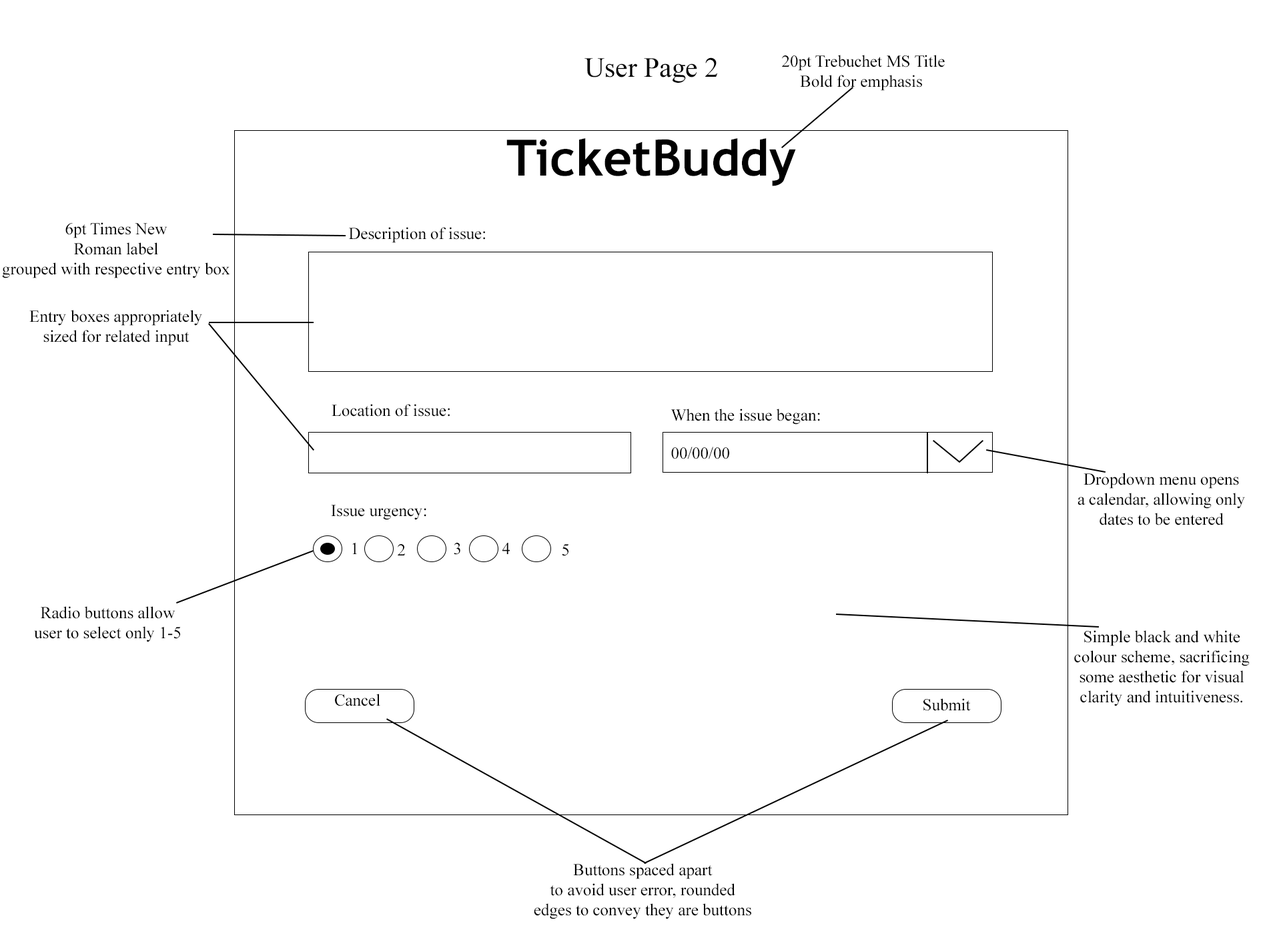
<style>
.page{position:relative;width:1261px;height:946px;background:#ffffff}
.page>*{position:absolute;margin:0}
.t1{font:27.8px "TimesNewRomanPSMT";color:#000000}
.t2{font:16.7px "TimesNewRomanPSMT";color:#000000}
.t3{font:50px "TrebuchetMS-Bold";color:#000000}
</style>
<div class="page">
<p class="t1" style="left:585px;top:57px;width:133px;height:26px">User Page 2</p>
<p class="t2" style="left:782px;top:55px;width:163px;height:36px;text-align:center">20pt Trebuchet MS Title<br>Bold for emphasis</p>
<p class="t3" style="left:506px;top:138px;width:290px;height:48px">TicketBuddy</p>
<p class="t2" style="left:2px;top:222px;width:228px;height:56px;text-align:center">6pt Times New<br>Roman label<br>grouped with respective entry box</p>
<p class="t2" style="left:349px;top:227px;width:136px;height:16px">Description of issue:</p>
<p class="t2" style="left:29px;top:310px;width:173px;height:36px;text-align:center">Entry boxes appropriately<br>sized for related input</p>
<p class="t2" style="left:332px;top:404px;width:118px;height:12px">Location of issue:</p>
<p class="t2" style="left:671px;top:408px;width:149px;height:16px">When the issue began:</p>
<p class="t2" style="left:671px;top:446px;width:58px;height:13px">00/00/00</p>
<p class="t2" style="left:1078px;top:472px;width:167px;height:53px;text-align:center">Dropdown menu opens<br>a calendar, allowing only<br>dates to be entered</p>
<p class="t2" style="left:331px;top:504px;width:95px;height:16px">Issue urgency:</p>
<p class="t2" style="left:352px;top:542px;width:5px;height:12px">1</p>
<p class="t2" style="left:398px;top:544px;width:7px;height:11px">2</p>
<p class="t2" style="left:454px;top:542px;width:6px;height:13px">3</p>
<p class="t2" style="left:502px;top:542px;width:8px;height:12px">4</p>
<p class="t2" style="left:562px;top:544px;width:7px;height:12px">5</p>
<p class="t2" style="left:34px;top:606px;width:147px;height:36px;text-align:center">Radio buttons allow<br>user to select only 1-5</p>
<p class="t2" style="left:1074px;top:630px;width:176px;height:76px;text-align:center">Simple black and white<br>colour scheme, sacrificing<br>some aesthetic for visual<br>clarity and intuitiveness.</p>
<p class="t2" style="left:335px;top:693px;width:45px;height:13px">Cancel</p>
<p class="t2" style="left:924px;top:698px;width:47px;height:13px">Submit</p>
<p class="t2" style="left:534px;top:863px;width:217px;height:56px;text-align:center">Buttons spaced apart<br>to avoid user error, rounded<br>edges to convey they are buttons</p>
</div>
